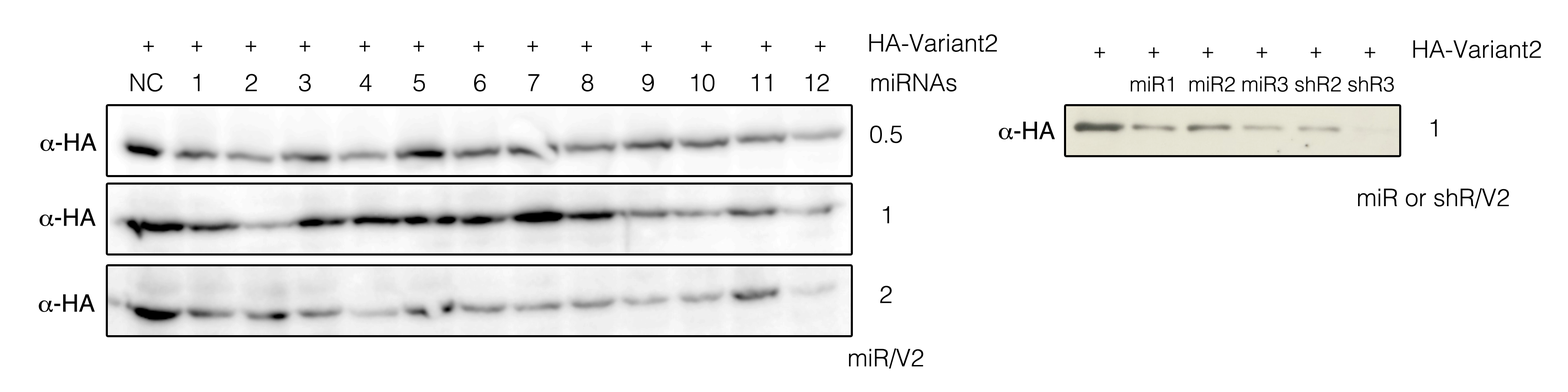
<style>
.page{position:relative;width:1568px;height:392px;background:#ffffff}
.page>*{position:absolute;margin:0}
.t1{font:20.7px "Helvetica-Light";color:#000000}
.t2{font:24.2px "Helvetica-Light";color:#000000}
.t3{font:24.2px "Helvetica";color:#000000}
.t4{font:24.2px "Symbol";color:#000000}
</style>
<div class="page">
<p class="t1" style="left:143px;top:34px;width:854px;height:18px">+      +       +       +        +       +        +       +       +        +        +        +       +<span class="t2">      HA-Variant2</span></p>
<p class="t1" style="left:1094px;top:40px;width:447px;height:18px">+       +       +       +       +       +      <span class="t2">HA-Variant2</span></p>
<p class="t2" style="left:131px;top:73px;width:826px;height:19px">NC    1      2      3       4      5       6      7      8       9     10     11    12      miRNAs</p>
<p class="t1" style="left:1131px;top:76px;width:263px;height:16px">miR1  miR2 miR3 shR2 shR3</p>
<p class="t2" style="left:870px;top:125px;width:32px;height:18px">0.5</p>
<p class="t3" style="left:999px;top:122px;width:56px;height:17px"><span class="t4">a</span>-HA</p>
<p class="t2" style="left:1431px;top:119px;width:6px;height:17px">1</p>
<p class="t3" style="left:40px;top:133px;width:57px;height:18px"><span class="t4">a</span>-HA</p>
<p class="t2" style="left:1358px;top:188px;width:151px;height:21px">miR or shR/V2</p>
<p class="t3" style="left:39px;top:208px;width:57px;height:18px"><span class="t4">a</span>-HA</p>
<p class="t2" style="left:883px;top:206px;width:6px;height:18px">1</p>
<p class="t2" style="left:880px;top:286px;width:12px;height:17px">2</p>
<p class="t3" style="left:39px;top:294px;width:56px;height:18px"><span class="t4">a</span>-HA</p>
<p class="t2" style="left:849px;top:348px;width:74px;height:21px">miR/V2</p>
</div>
